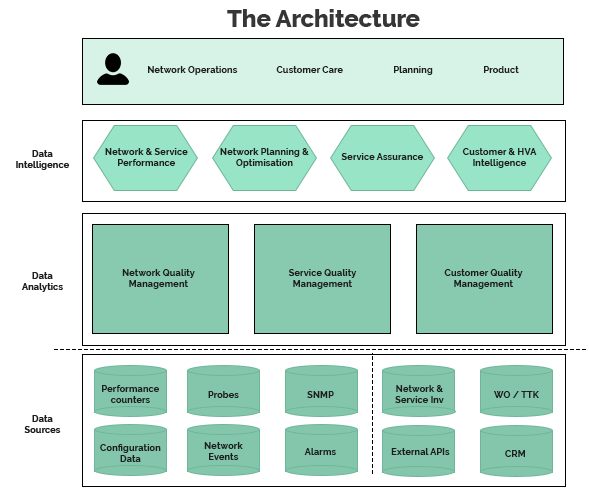
<style>
.page{position:relative;width:589px;height:493px;background:#ffffff}
.page>*{position:absolute;margin:0}
.t1{font:23.8px "Raleway-ExtraBold";color:#363636}
.t2{font:9.3px "Raleway-Bold";color:#1e1e1e}
</style>
<div class="page">
<p class="t1" style="left:227px;top:9px;width:193px;height:18px">The Architecture</p>
<p class="t2" style="left:148px;top:66px;width:90px;height:9px">Network Operations</p>
<p class="t2" style="left:276px;top:66px;width:67px;height:7px">Customer Care</p>
<p class="t2" style="left:394px;top:66px;width:39px;height:9px">Planning</p>
<p class="t2" style="left:484px;top:66px;width:35px;height:7px">Product</p>
<p class="t2" style="left:16px;top:150px;width:54px;height:20px;text-align:center">Data<br>Intelligence</p>
<p class="t2" style="left:105px;top:148px;width:83px;height:18px;text-align:center">Network &amp; Service<br>Performance</p>
<p class="t2" style="left:220px;top:148px;width:89px;height:20px;text-align:center">Network Planning &amp;<br>Optimisation</p>
<p class="t2" style="left:462px;top:148px;width:75px;height:20px;text-align:center">Customer &amp; HVA<br>Intelligence</p>
<p class="t2" style="left:341px;top:153px;width:83px;height:7px">Service Assurance</p>
<p class="t2" style="left:122px;top:269px;width:73px;height:20px;text-align:center">Network Quality<br>Management</p>
<p class="t2" style="left:288px;top:269px;width:69px;height:20px;text-align:center">Service Quality<br>Management</p>
<p class="t2" style="left:444px;top:269px;width:79px;height:20px;text-align:center">Customer Quality<br>Management</p>
<p class="t2" style="left:21px;top:272px;width:42px;height:20px;text-align:center">Data<br>Analytics</p>
<p class="t2" style="left:102px;top:385px;width:58px;height:18px;text-align:center">Performance<br>counters</p>
<p class="t2" style="left:395px;top:385px;width:49px;height:18px;text-align:center">Network &amp;<br>Service Inv</p>
<p class="t2" style="left:208px;top:391px;width:31px;height:7px">Probes</p>
<p class="t2" style="left:307px;top:391px;width:27px;height:7px">SNMP</p>
<p class="t2" style="left:493px;top:391px;width:46px;height:7px">WO / TTK</p>
<p class="t2" style="left:24px;top:415px;width:37px;height:18px;text-align:center">Data<br>Sources</p>
<p class="t2" style="left:100px;top:444px;width:61px;height:18px;text-align:center">Configuration<br>Data</p>
<p class="t2" style="left:204px;top:442px;width:39px;height:18px;text-align:center">Network<br>Events</p>
<p class="t2" style="left:304px;top:448px;width:32px;height:7px">Alarms</p>
<p class="t2" style="left:391px;top:448px;width:59px;height:7px">External APIs</p>
<p class="t2" style="left:505px;top:450px;width:20px;height:7px">CRM</p>
</div>
